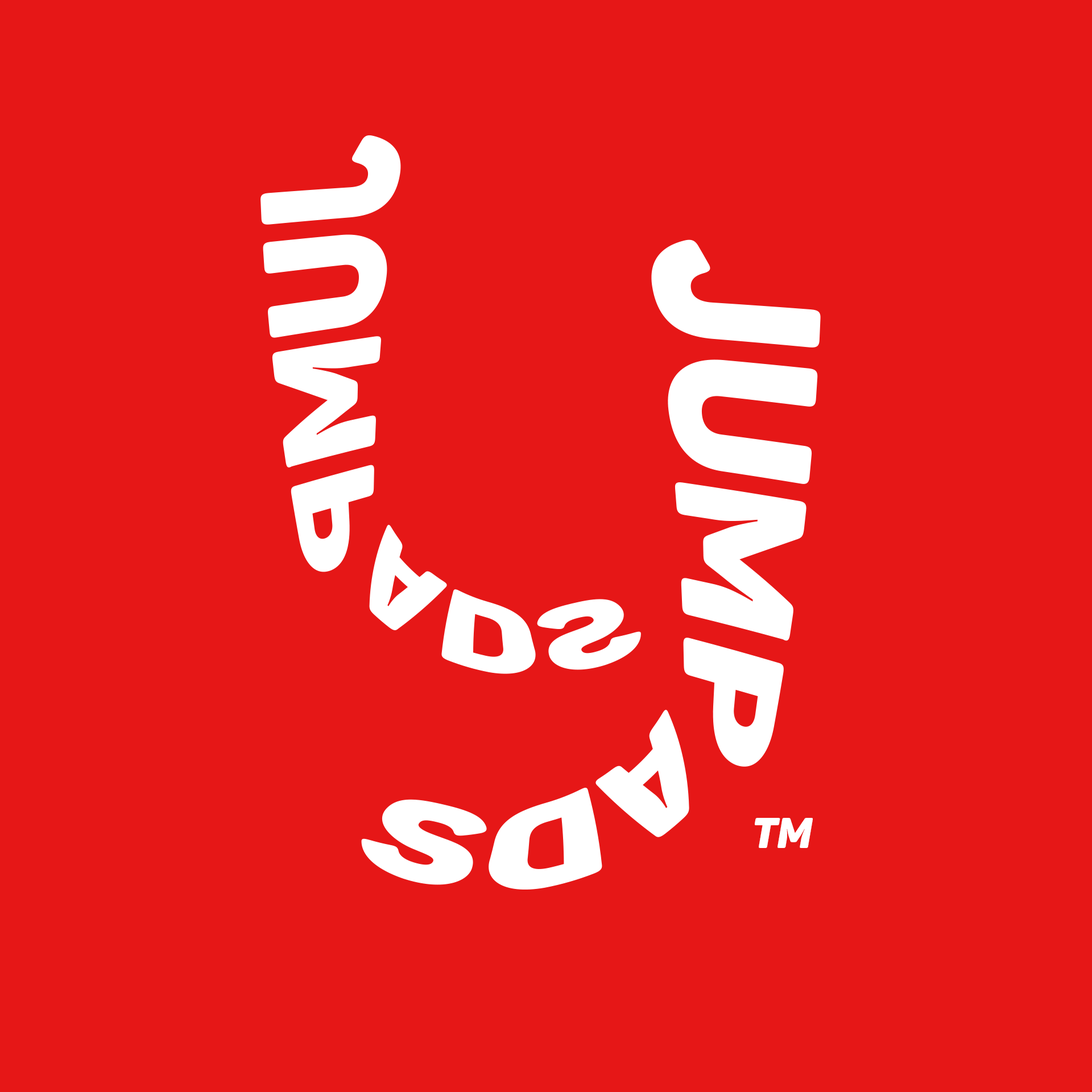
<style>
.page{position:relative;width:1092px;height:1092px;background:#e61717}
.page>*{position:absolute;margin:0}
.t1{font:152.4px "Panton-BlackitalicCaps";color:#ffffff}
.t2{font:183.9px "Panton-BlackitalicCaps";color:#ffffff}
.t3{font:96.6px "Panton-BlackitalicCaps";color:#ffffff}
.t4{font:116.5px "Panton-BlackitalicCaps";color:#ffffff}
.t5{font:42.6px "Panton-BlackitalicCaps";color:#ffffff}
</style>
<div class="page">
<p class="t1" style="left:260px;top:135px;width:141px;height:437px;rotate:90deg">JUMP</p>
<p class="t2" style="left:651px;top:239px;width:170px;height:528px;rotate:90deg">JUMP</p>
<p class="t3" style="left:369px;top:524px;width:272px;height:150px;rotate:15deg">ADS</p>
<p class="t4" style="left:361px;top:710px;width:328px;height:180px;rotate:165deg">ADS</p>
<p class="t5" style="left:755px;top:818px;width:58px;height:30px">tm</p>
</div>
